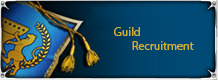
<style>
.page{position:relative;width:218px;height:80px}
.page>*{position:absolute;margin:0}
.t1{font:12px "MyriadPro-Regular";color:#cdaf31}
</style>
<div class="page">
<p class="t1" style="left:114px;top:27px;width:80px;height:23px">Guild<br>       Recruitment</p>
</div>
